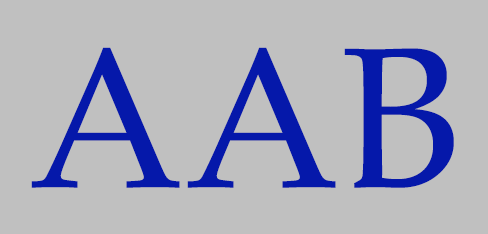
<style>
.page{position:relative;width:488px;height:234px;background:#c0c0c0}
.page>*{position:absolute;margin:0}
.t1{font:200px "BookAntiqua";color:#0518aa}
</style>
<div class="page">
<p class="t1" style="left:31px;top:47px;width:423px;height:141px">AAB</p>
</div>
